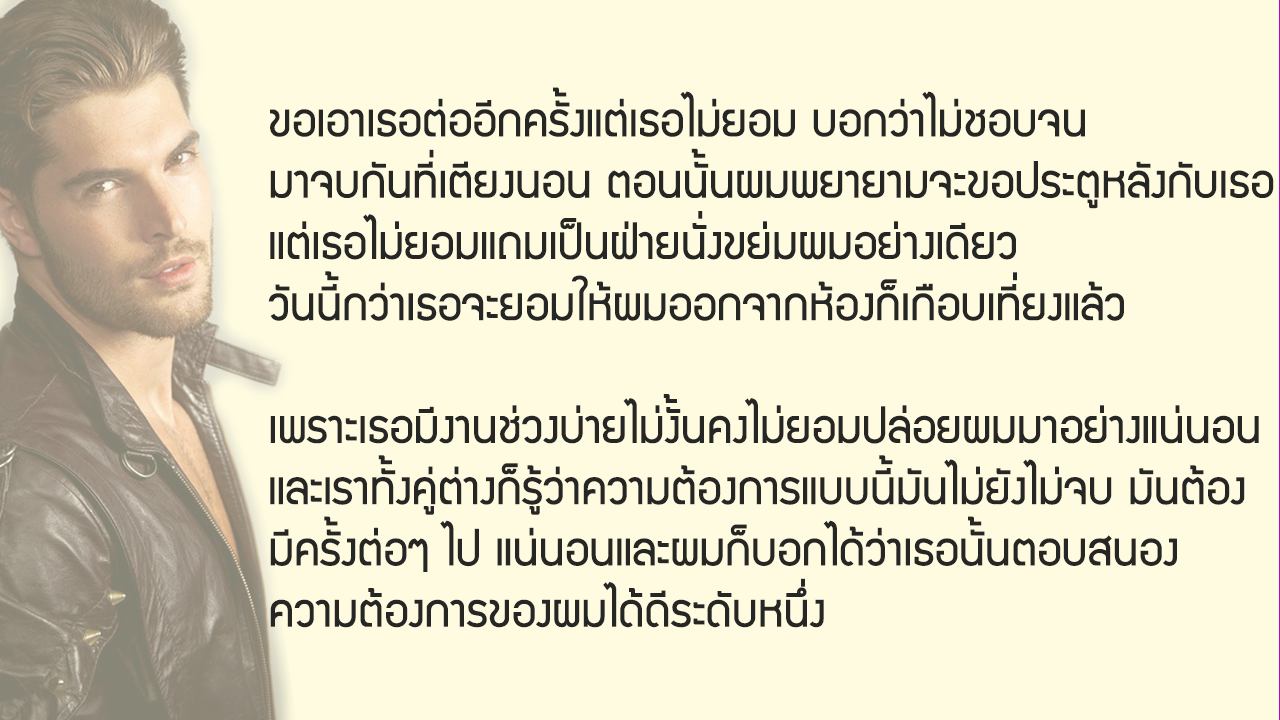
<style>
.page{position:relative;width:1280px;height:720px;background:#fefbe0}
.page>*{position:absolute;margin:0}
.t1{font:51.1px "supermarket";color:#262625}
</style>
<div class="page">
<p class="t1" style="left:268px;top:87px;width:1006px;height:541px">ขอเอาเธอต่ออีกครั้งแต่เธอไม่ยอม บอกว่าไม่ชอบจน <br>มาจบกันที่เตียงนอน ตอนนั้นผมพยายามจะขอประตูหลังกับเธอ<br>แต่เธอไม่ยอมแถมเป็นฝ่ายนั่งขย่มผมอย่างเดียว<br>วันนี้กว่าเธอจะยอมให้ผมออกจากห้องก็เกือบเที่ยงแล้ว<br><br>เพราะเธอมีงานช่วงบ่ายไม่งั้นคงไม่ยอมปล่อยผมมาอย่างแน่นอน<br>และเราทั้งคู่ต่างก็รู้ว่าความต้องการแบบนี้มันไม่ยังไม่จบ มันต้อง<br>มีครั้งต่อๆ ไป แน่นอนและผมก็บอกได้ว่าเธอนั้นตอบสนอง<br>ความต้องการของผมได้ดีระดับหนึ่ง</p>
</div>
